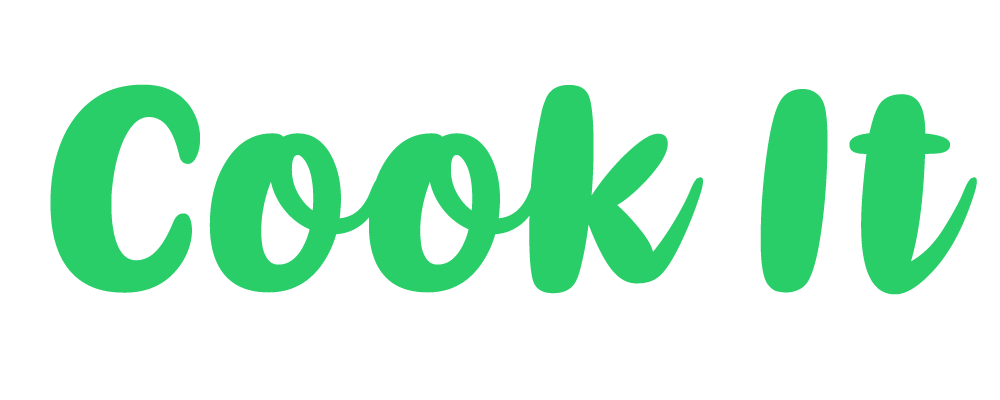
<style>
.page{position:relative;width:1000px;height:400px;background:#ffffff}
.page>*{position:absolute;margin:0}
.t1{font:269.6px "Kathen";letter-spacing:0.02em;color:#29ce69}
</style>
<div class="page">
<p class="t1" style="left:50px;top:84px;width:927px;height:211px">Cook It</p>
</div>
